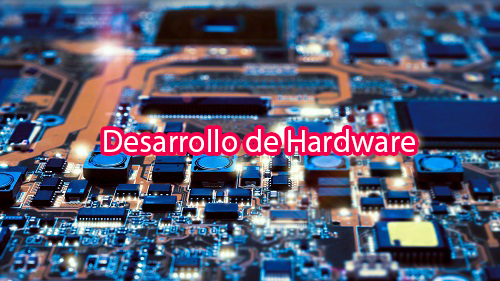
<style>
.page{position:relative;width:500px;height:281px}
.page>*{position:absolute;margin:0}
.t1{font:32px "MyriadPro-Regular";color:#ffffff}
</style>
<div class="page">
<p class="t1" style="left:104px;top:129px;width:311px;height:23px">Desarrollo de Hardware</p>
</div>
